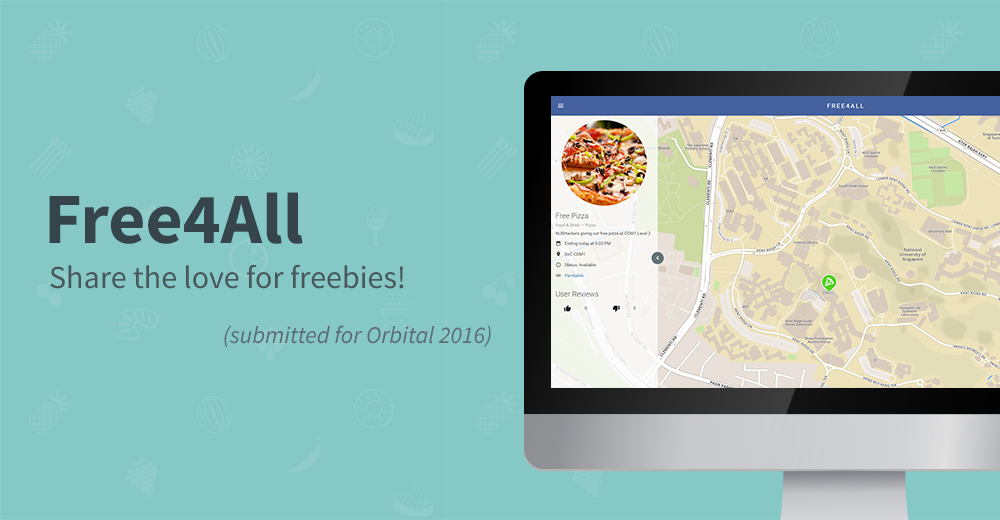
<style>
.page{position:relative;width:1000px;height:520px;background:#85c8c5}
.page>*{position:absolute;margin:0}
.t1{font:72px "SourceSansPro-Bold";color:#36454c}
.t2{font:32px "SourceSansPro-Regular";color:#48575c}
.t3{font:24px "SourceSansPro-It";color:#5b6c74}
</style>
<div class="page">
<p class="t1" style="left:49px;top:192px;width:254px;height:52px">Free4All</p>
<p class="t2" style="left:50px;top:264px;width:354px;height:25px">Share the love for freebies!</p>
<p class="t3" style="left:224px;top:325px;width:267px;height:23px">(submitted for Orbital 2016)</p>
</div>
